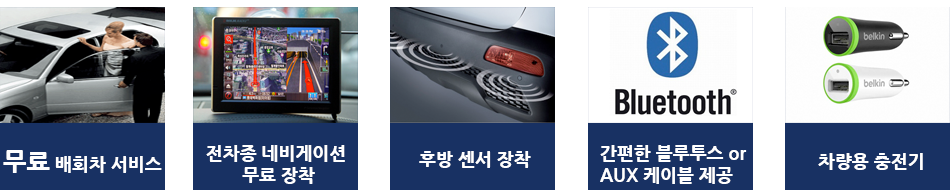
<style>
.page{position:relative;width:950px;height:190px;background:#183163}
.page>*{position:absolute;margin:0}
.t1{font:18px "NanumGothicExtraBold";color:#ffffff}
.t2{font:25px "NanumGothicExtraBold";color:#ffffff}
</style>
<div class="page">
<p class="t1" style="left:3px;top:150px;width:159px;height:23px"><span class="t2">무료</span> 배회차 서비스</p>
<p class="t1" style="left:206px;top:145px;width:139px;height:39px;text-align:center">전차종 네비게이션<br> 무료 장착</p>
<p class="t1" style="left:600px;top:145px;width:147px;height:39px">간편한 블루투스 or <br>AUX 케이블 제공</p>
<p class="t1" style="left:419px;top:151px;width:112px;height:17px">후방 센서 장착</p>
<p class="t1" style="left:818px;top:153px;width:105px;height:17px">차량용 충전기</p>
</div>
